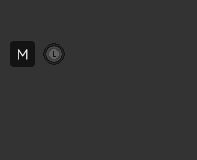
<style>
.page{position:relative;width:197px;height:160px;background:#333333}
.page>*{position:absolute;margin:0}
.t1{font:14px "Quicksand-Light";color:#ffffff}
</style>
<div class="page">
<p class="t1" style="left:18px;top:49px;width:10px;height:11px">M</p>
</div>
